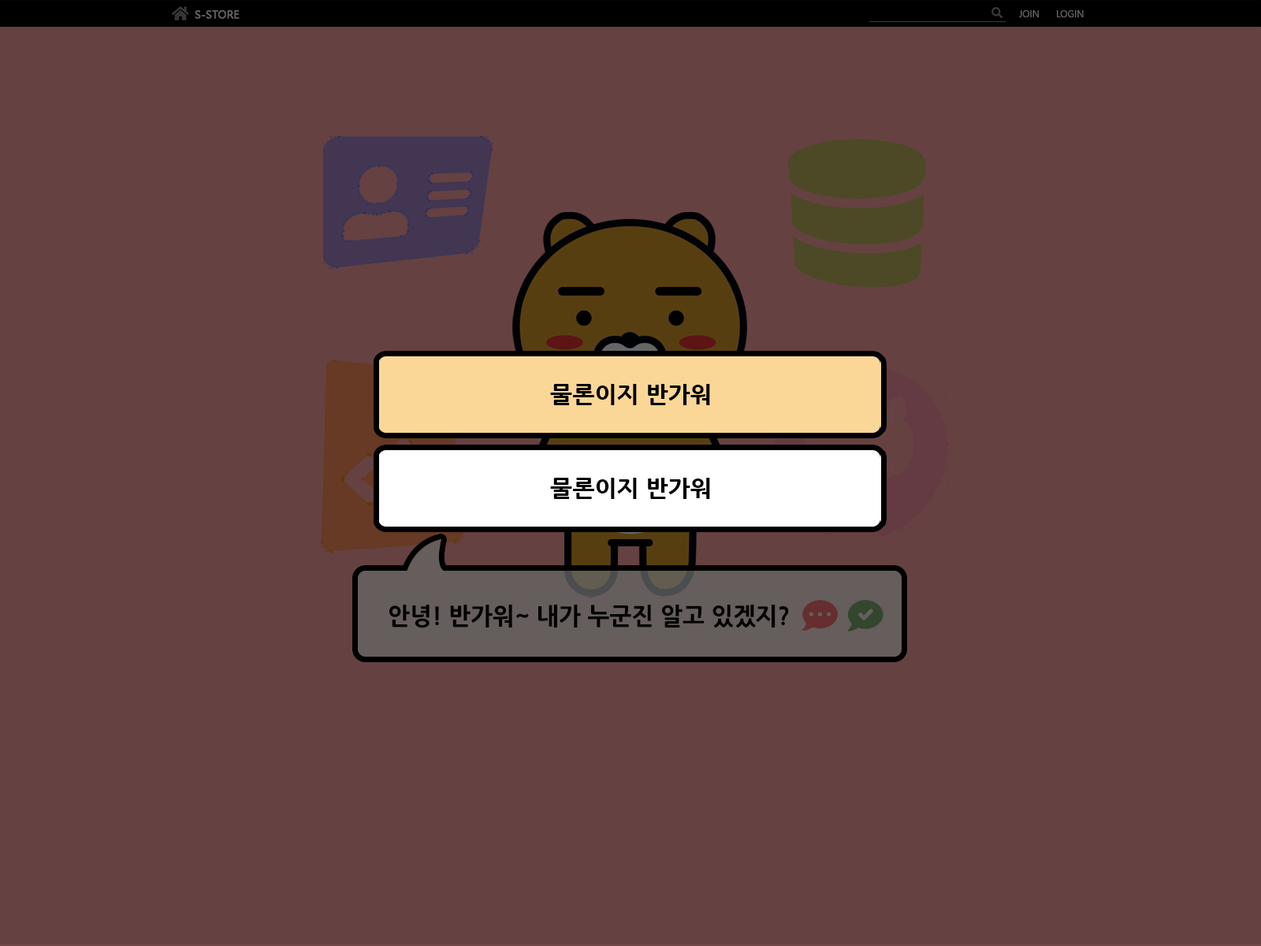
<style>
.page{position:relative;width:1261px;height:946px;background:#664141}
.page>*{position:absolute;margin:0}
.t1{font:11px "MalgunGothic";color:#666666;font-weight:bold}
.t2{font:9.5px "MalgunGothic";color:#666666}
.t3{font:23.6px "NanumGothicExtraBold";color:#000000}
.t4{font:23.9px "NanumGothicExtraBold";color:#000000}
</style>
<div class="page">
<p class="t1" style="left:195px;top:10px;width:45px;height:9px">S-STORE</p>
<p class="t2" style="left:1019px;top:10px;width:20px;height:7px">JOIN</p>
<p class="t2" style="left:1057px;top:10px;width:27px;height:7px">LOGIN</p>
<p class="t3" style="left:550px;top:384px;width:160px;height:21px">물론이지 반가워</p>
<p class="t3" style="left:550px;top:478px;width:160px;height:21px">물론이지 반가워</p>
<p class="t4" style="left:389px;top:604px;width:400px;height:24px">안녕! 반가워~ 내가 누군진 알고 있겠지?</p>
</div>
